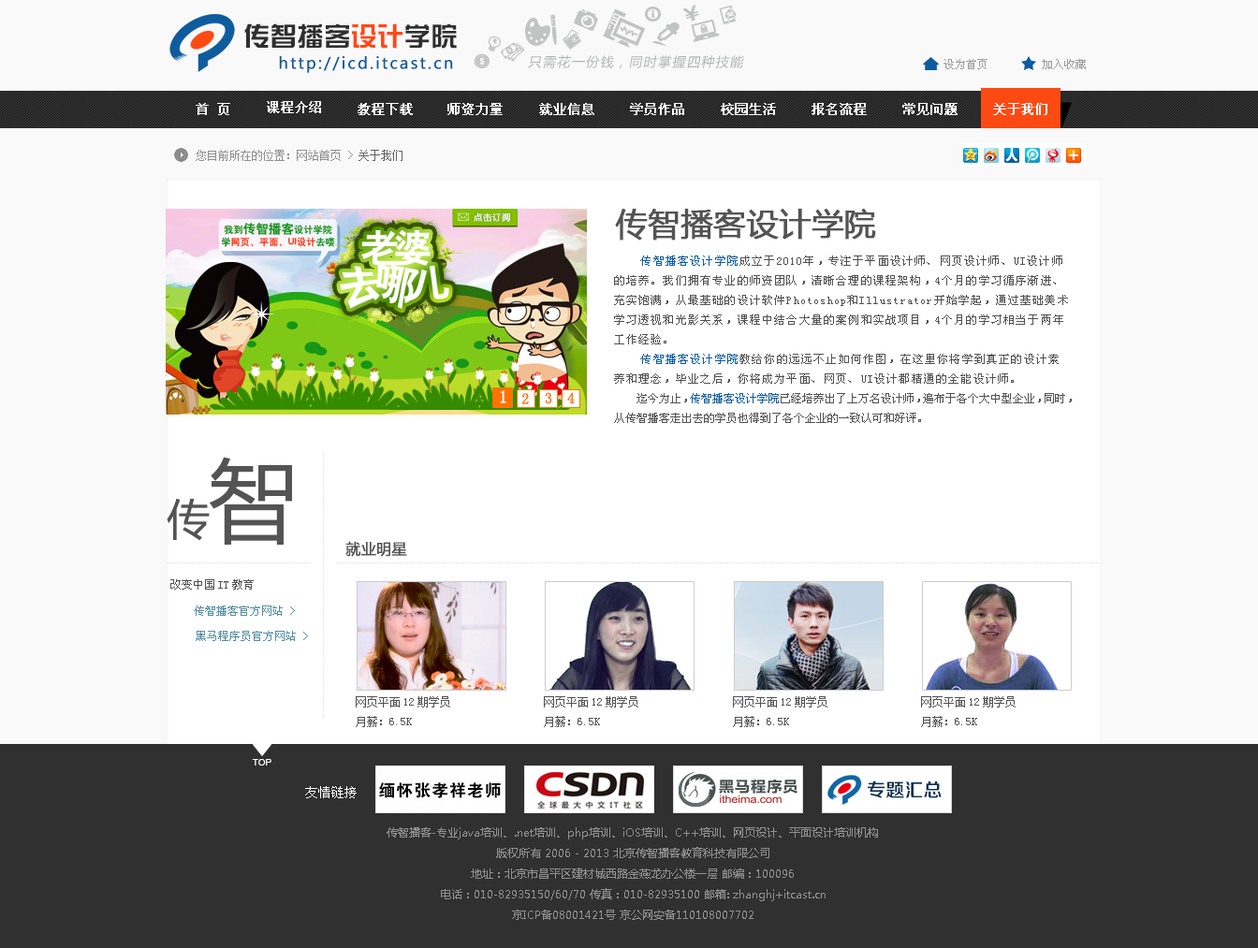
<style>
.page{position:relative;width:1258px;height:948px;background:#ffffff}
.page>*{position:absolute;margin:0}
.t1{font:26.2px "HYk1gj";color:#2f2f2f}
.t2{font:26.2px "HYk1gj";color:#fd4a13}
.t3{font:16.8px "Ebrima";letter-spacing:0.1em;color:#0e5c9e;font-weight:bold}
.t4{font:13.1px "MicrosoftYaHei";letter-spacing:0.1em;color:#b1b3b3;font-style:italic}
.t5{font:11.2px "SimSun";color:#9b9b9b}
.t6{font:13.1px "SimSun";color:#fafafa;font-weight:bold}
.t7{font:11.2px "SimSun";color:#909090}
.t8{font:11.2px "SimSun";color:#616161}
.t9{font:31.8px "MicrosoftYaHei";color:#545454;font-weight:bold}
.t10{font:11.2px "SimSun";letter-spacing:0.1em;color:#515151}
.t11{font:11.2px "SimSun";letter-spacing:0.1em;color:#0e5c9e}
.t12{font:11.2px "SimSun";color:#515151}
.t13{font:11.2px "SimSun";color:#0e5c9e}
.t14{font:16.8px "SimSun";letter-spacing:0.1em;color:#fefefe;font-weight:bold}
.t15{font:15px "SimSun";letter-spacing:0.1em;color:#ff7300;font-weight:bold}
.t16{font:89.8px "MicrosoftYaHei";color:#545454}
.t17{font:43px "MicrosoftYaHei";color:#545454}
.t18{font:15px "MicrosoftYaHei";color:#515151;font-weight:bold}
.t19{font:11.2px "SimSun";color:#538c9f}
.t20{font:9.4px "ArialMT";color:#ffffff}
.t21{font:13.1px "SimSun";color:#ffffff}
.t22{font:11.2px/20.6px "MicrosoftYaHei";color:#909090}
</style>
<div class="page">
<p class="t1" style="left:244px;top:23px;width:213px;height:26px">传智播客<span class="t2">设计</span>学院</p>
<p class="t3" style="left:279px;top:56px;width:174px;height:17px">http://icd.itcast.cn</p>
<p class="t4" style="left:528px;top:55px;width:216px;height:13px">只需花一份钱，同时掌握四种技能</p>
<p class="t5" style="left:943px;top:59px;width:44px;height:10px">设为首页</p>
<p class="t5" style="left:1042px;top:59px;width:44px;height:10px">加入收藏</p>
<p class="t6" style="left:267px;top:101px;width:54px;height:12px">课程介绍</p>
<p class="t6" style="left:196px;top:103px;width:34px;height:12px">首 页</p>
<p class="t6" style="left:357px;top:103px;width:56px;height:12px">教程下载</p>
<p class="t6" style="left:447px;top:103px;width:56px;height:12px">师资力量</p>
<p class="t6" style="left:539px;top:103px;width:55px;height:12px">就业信息</p>
<p class="t6" style="left:630px;top:103px;width:54px;height:12px">学员作品</p>
<p class="t6" style="left:721px;top:103px;width:55px;height:12px">校园生活</p>
<p class="t6" style="left:811px;top:103px;width:56px;height:12px">报名流程</p>
<p class="t6" style="left:902px;top:103px;width:55px;height:12px">常见问题</p>
<p class="t6" style="left:993px;top:103px;width:54px;height:12px">关于我们</p>
<p class="t7" style="left:196px;top:150px;width:206px;height:11px">您目前所在的位置：网站首页 &gt; <span class="t8">关于我们</span></p>
<p class="t9" style="left:615px;top:209px;width:261px;height:32px">传智播客设计学院</p>
<p class="t10" style="left:614px;top:255px;width:458px;height:168px"><span class="t11">传智播客设计学院</span>成立于2010年，专注于平面设计师、网页设计师、UI设计师的培养。我们拥有专业的师资团队，清晰合理的课程架构，4个月的学习循序渐进、充实饱满，从最基础的设计软件Photoshop和Illustrator开始学起，通过基础美术学习透视和光影关系，课程中结合大量的案例和实战项目，4个月的学习相当于两年工作经验。<br>    <span class="t11">传智播客设计学院</span>教给你的远远不止如何作图，在这里你将学到真正的设计素养和理念，毕业之后，你将成为平面、网页、UI设计都精通的全能设计师。<br><span class="t12">    迄今为止，</span><span class="t13">传智播客设计学院</span><span class="t12">已经培养出了上万名设计师，遍布于各个大中型企业，同时，从传智播客走出去的学员也得到了各个企业的一致认可和好评。</span></p>
<p class="t14" style="left:500px;top:390px;width:6px;height:13px">1</p>
<p class="t15" style="left:521px;top:393px;width:8px;height:11px">2</p>
<p class="t15" style="left:545px;top:392px;width:7px;height:12px">3</p>
<p class="t15" style="left:567px;top:392px;width:8px;height:11px">4</p>
<p class="t16" style="left:209px;top:457px;width:83px;height:88px">智</p>
<p class="t17" style="left:167px;top:498px;width:43px;height:43px">传</p>
<p class="t18" style="left:345px;top:541px;width:62px;height:16px">就业明星</p>
<p class="t12" style="left:170px;top:579px;width:84px;height:11px">改变中国IT教育</p>
<p class="t19" style="left:194px;top:606px;width:101px;height:10px">传智播客官方网站 &gt;</p>
<p class="t19" style="left:196px;top:631px;width:112px;height:10px">黑马程序员官方网站 &gt;</p>
<p class="t12" style="left:356px;top:696px;width:94px;height:31px">网页平面12期学员<br>月薪：6.5K</p>
<p class="t12" style="left:544px;top:696px;width:94px;height:31px">网页平面12期学员<br>月薪：6.5K</p>
<p class="t12" style="left:733px;top:696px;width:94px;height:31px">网页平面12期学员<br>月薪：6.5K</p>
<p class="t12" style="left:921px;top:696px;width:94px;height:31px">网页平面12期学员<br>月薪：6.5K</p>
<p class="t20" style="left:252px;top:759px;width:19px;height:7px">TOP</p>
<p class="t21" style="left:305px;top:786px;width:52px;height:12px">友情链接</p>
<p class="t22" style="left:387px;top:827px;width:491px;height:93px;text-align:center">传智播客-专业java培训、.net培训、php培训、iOS培训、C++培训、网页设计、平面设计培训机构<br>版权所有 2006 - 2013 北京传智播客教育科技有限公司<br>地址：北京市昌平区建材城西路金燕龙办公楼一层 邮编：100096<br>电话：010-82935150/60/70 传真：010-82935100 邮箱: zhanghj+itcast.cn<br>京ICP备08001421号 京公网安备110108007702</p>
</div>
